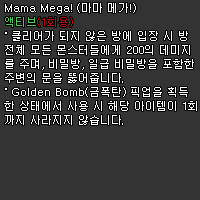
<style>
.page{position:relative;width:200px;height:200px;background:#333333}
.page>*{position:absolute;margin:0}
.t1{font:11px/14px "Dotum";color:#ffffff}
.t2{font:11px/14px "Dotum";color:#56c45b}
.t3{font:11px/14px "Dotum";color:#be0b0f}
</style>
<div class="page">
<p class="t1" style="left:4px;top:3px;width:193px;height:122px">Mama Mega! (마마 메가!)<br><span class="t2">액티브</span><span class="t3">(1회용)<br></span>˚ 클리어가 되지 않은 방에 입장 시 방<br>전체 모든 몬스터들에게 200의 데미지<br>를 주며, 비밀방, 일급 비밀방을 포함한<br>주변의 문을 뚫어줍니다.<br>˚ Golden Bomb(금폭탄) 픽업을 획득<br>한 상태에서 사용 시 해당 아이템이 1회<br>까지 사라지지 않습니다.</p>
</div>
